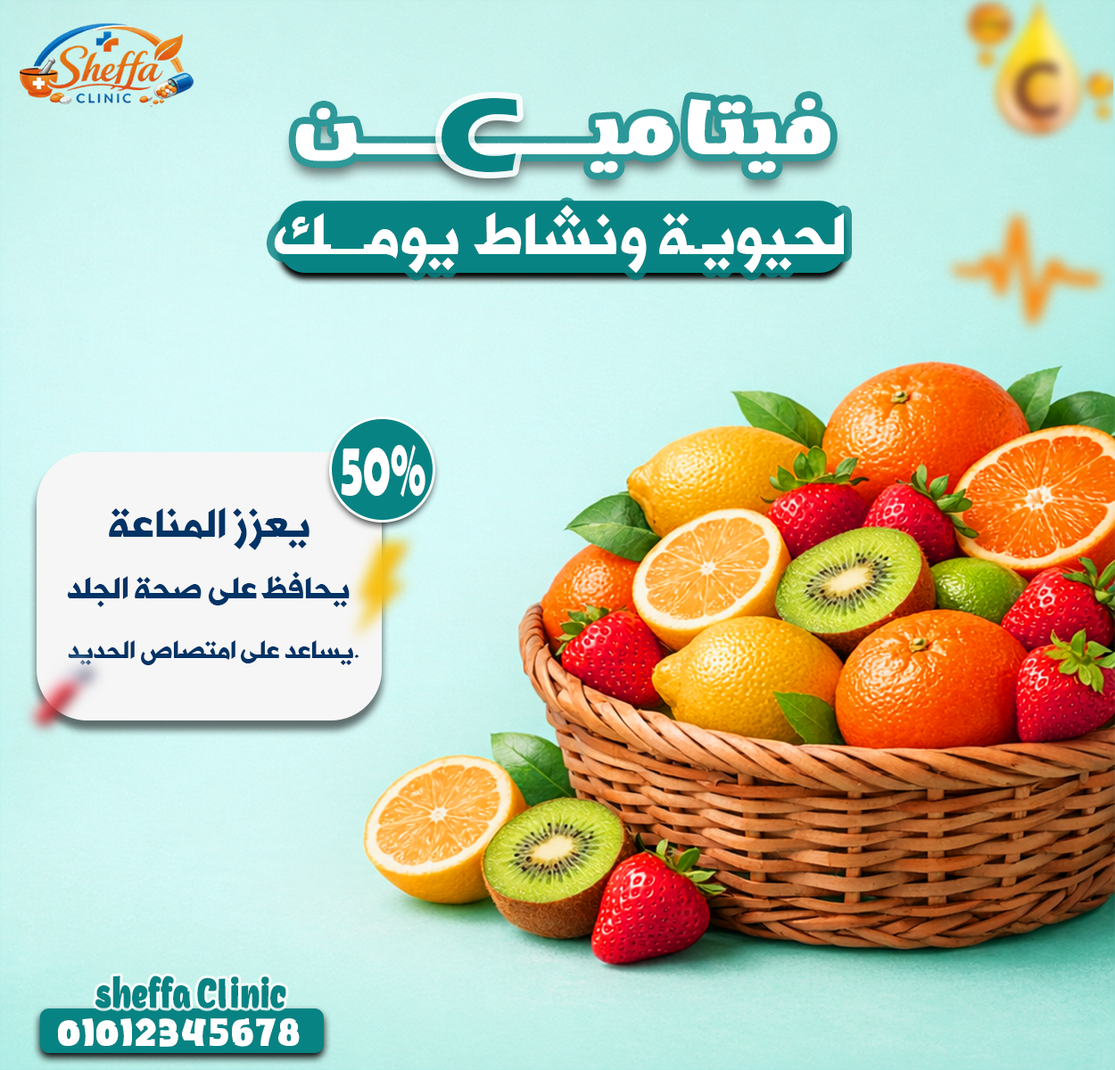
<style>
.page{position:relative;width:1115px;height:1070px}
.page>*{position:absolute;margin:0}
.t1{font:68px "DGAqsa";letter-spacing:0.055em;color:#ffffff}
.t2{font:106.3px "ErasITC-Bold";letter-spacing:-0.06em;color:#088383;scale:1.18 1}
.t3{font:57.2px "AlHurraTxtBold";color:#ffffff}
.t4{font:79.4px "BerlinSansFBDemi-Bold";color:#ffffff;scale:0.56 1}
.t5{font:39.8px "AlHurraTxtBold";color:#003366}
.t6{font:30.3px "AlHurraTxtBold";color:#003366}
.t7{font:24.3px "AlHurraTxtBold";color:#003366}
.t8{font:41.3px "DGAqsa";color:#088383;scale:0.64 1}
.t9{font:33.6px "DGAqsa";color:#ffffff}
</style>
<div class="page">
<p class="t1" style="left:295px;top:98px;width:535px;height:75px">فيتاميــــــــن</p>
<p class="t2" style="left:441px;top:98px;width:76px;height:74px">C</p>
<p class="t3" style="left:274px;top:205px;width:569px;height:68px">لحيويـة ونشاط يومـــك</p>
<p class="t4" style="left:341px;top:445px;width:84px;height:52px">50%</p>
<p class="t5" style="left:109px;top:507px;width:200px;height:43px">يعزز المناعة</p>
<p class="t6" style="left:67px;top:572px;width:283px;height:35px">يحافظ على صحة الجلد</p>
<p class="t7" style="left:68px;top:640px;width:291px;height:25px">يساعد على امتصاص الحديد.</p>
<p class="t8" style="left:95px;top:975px;width:191px;height:33px">sheffa Clinic</p>
<p class="t9" style="left:58px;top:1017px;width:242px;height:30px">01012345678</p>
</div>
